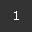
<style>
.page{position:relative;width:32px;height:32px;background:#333333}
.page>*{position:absolute;margin:0}
.t1{font:12px "CenturySchoolbook";letter-spacing:0.06em;color:#ffffff}
</style>
<div class="page">
<p class="t1" style="left:14px;top:11px;width:5px;height:9px">1</p>
</div>
